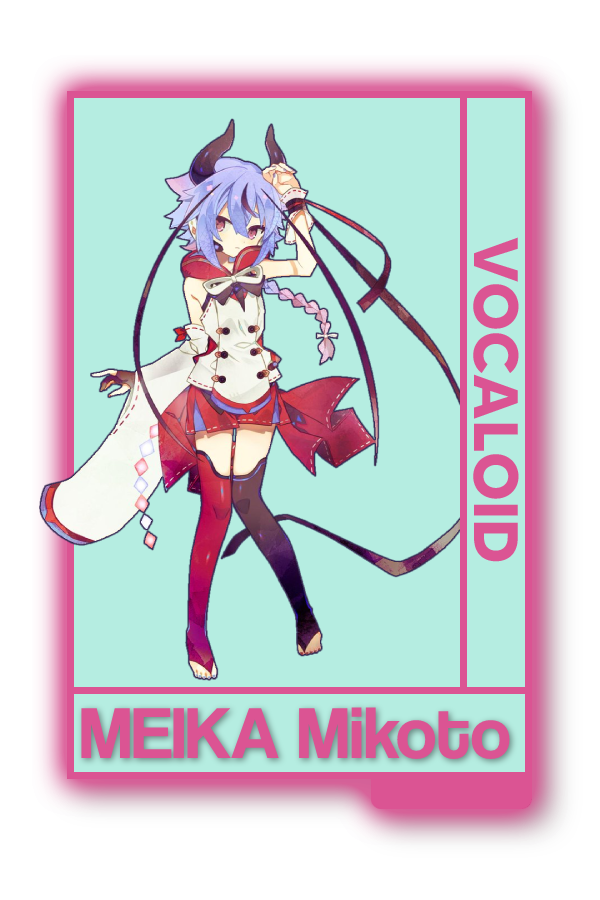
<style>
.page{position:relative;width:600px;height:900px;background:#b5ede1}
.page>*{position:absolute;margin:0}
.t1{font:62.5px "MADETOMMY-Bold";color:#db5493}
.t2{font:75px "CoolveticaRg-Regular";color:#db5493}
</style>
<div class="page">
<p class="t1" style="left:473px;top:237px;width:46px;height:325px;rotate:90deg">VOCALOID</p>
<p class="t2" style="left:81px;top:707px;width:429px;height:52px">MEIKA Mikoto</p>
</div>
